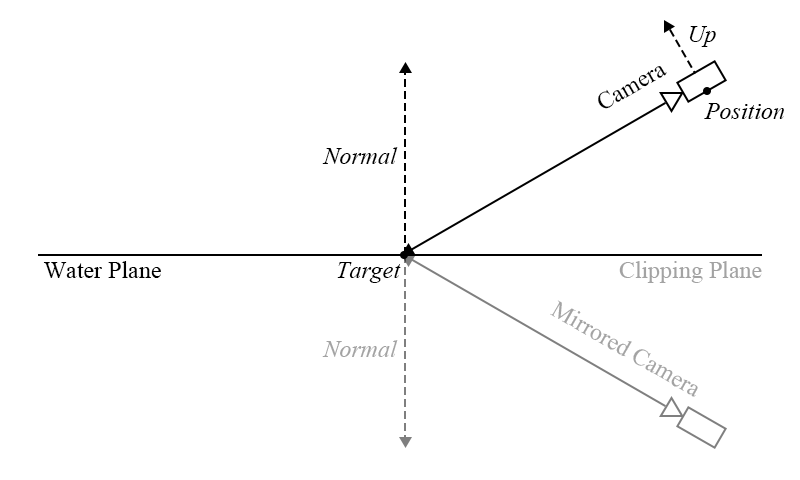
<style>
.page{position:relative;width:800px;height:480px;background:#ffffff}
.page>*{position:absolute;margin:0}
.t1{font:24px "TimesNewRomanPS-ItalicMT";color:#000000}
.t2{font:24px "TimesNewRomanPSMT";color:#000000}
.t3{font:24px "TimesNewRomanPSMT";color:#a3a3a3}
.t4{font:24px "TimesNewRomanPS-ItalicMT";color:#a3a3a3}
</style>
<div class="page">
<p class="t1" style="left:689px;top:26px;width:27px;height:21px">Up</p>
<p class="t2" style="left:598px;top:66px;width:69px;height:43px;rotate:-30deg">Camera</p>
<p class="t1" style="left:704px;top:103px;width:80px;height:16px">Position</p>
<p class="t1" style="left:322px;top:147px;width:76px;height:17px">Normal</p>
<p class="t2" style="left:43px;top:261px;width:118px;height:17px">Water Plane</p>
<p class="t1" style="left:337px;top:262px;width:64px;height:21px">Target</p>
<p class="t3" style="left:619px;top:261px;width:143px;height:22px">Clipping Plane</p>
<p class="t3" style="left:550px;top:300px;width:148px;height:97px;rotate:30deg">Mirrored Camera</p>
<p class="t4" style="left:322px;top:340px;width:76px;height:17px">Normal</p>
</div>
